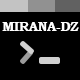
<style>
.page{position:relative;width:80px;height:80px;background:#000000}
.page>*{position:absolute;margin:0}
.t1{font:12.5px "BookmanOldStyle-Bold";color:#ffffff}
</style>
<div class="page">
<p class="t1" style="left:2px;top:22px;width:77px;height:9px">MIRANA-DZ</p>
</div>
